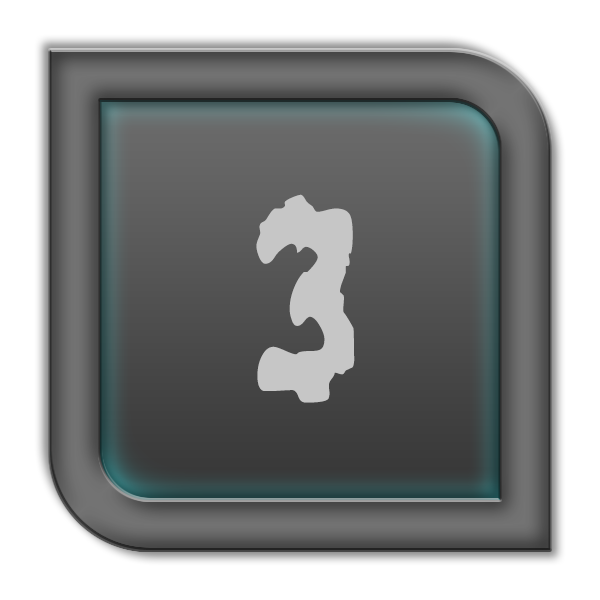
<style>
.page{position:relative;width:600px;height:600px;background:#ffffff}
.page>*{position:absolute;margin:0}
.t1{font:240px "GoreFontII";color:#c6c6c6;scale:0.83 1}
</style>
<div class="page">
<p class="t1" style="left:256px;top:194px;width:99px;height:209px">3</p>
</div>
